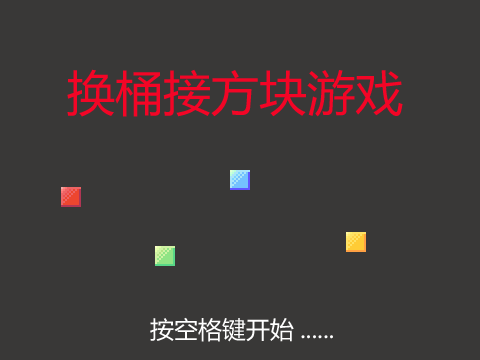
<style>
.page{position:relative;width:480px;height:360px;background:#393837}
.page>*{position:absolute;margin:0}
.t1{font:48px "MicrosoftYaHei";color:#f30526}
.t2{font:24px "MicrosoftYaHei";color:#ffffff}
</style>
<div class="page">
<p class="t1" style="left:67px;top:69px;width:336px;height:48px">换桶接方块游戏</p>
<p class="t2" style="left:150px;top:317px;width:183px;height:25px">按空格键开始......</p>
</div>
